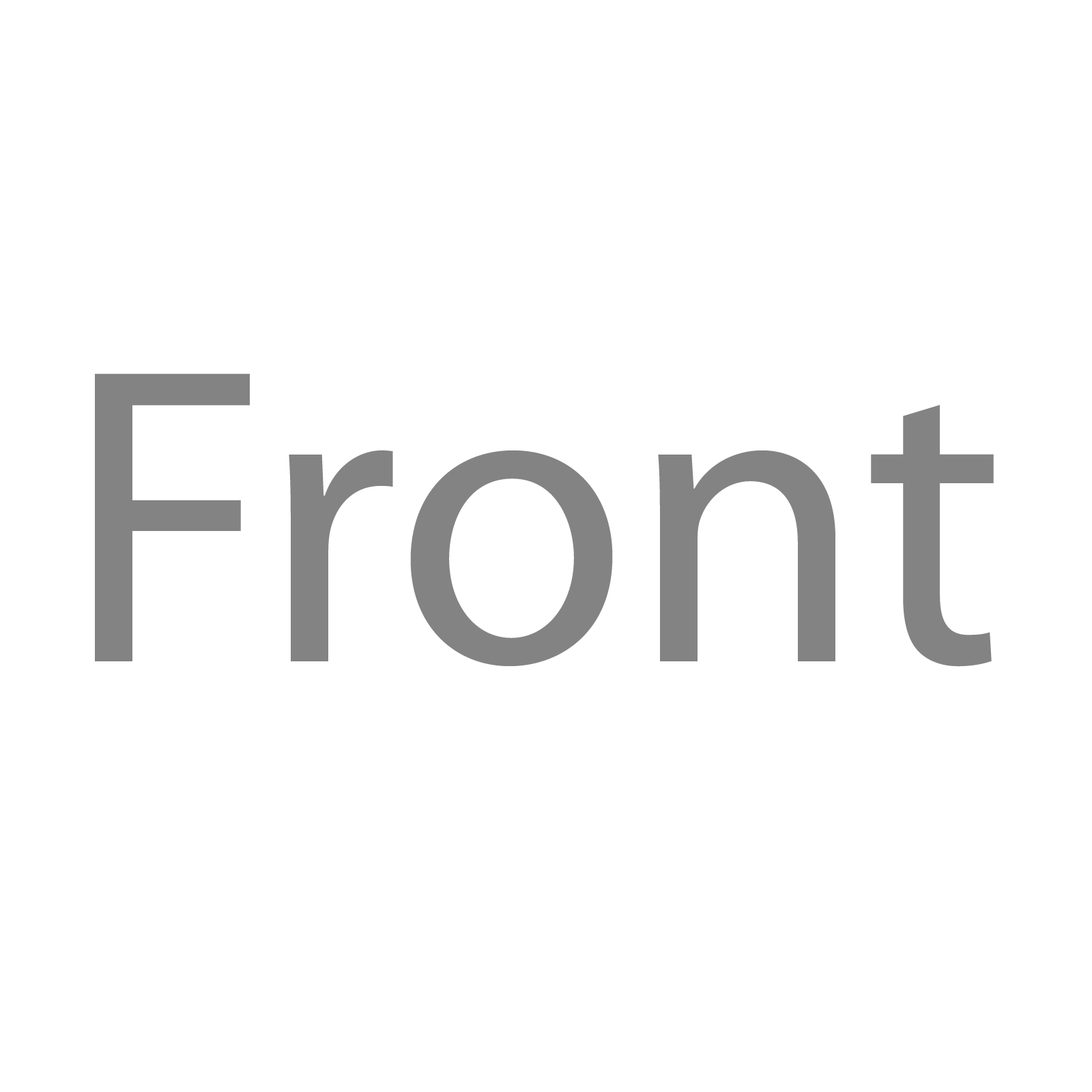
<style>
.page{position:relative;width:1092px;height:1092px;background:#ffffff}
.page>*{position:absolute;margin:0}
.t1{font:426.6px "MyriadPro-Regular";color:#838383}
</style>
<div class="page">
<p class="t1" style="left:95px;top:373px;width:899px;height:294px">Front</p>
</div>
